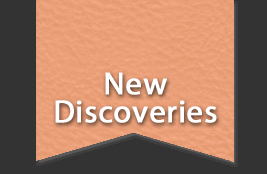
<style>
.page{position:relative;width:267px;height:174px;background:#333333}
.page>*{position:absolute;margin:0}
.t1{font:32px "MyriadPro-Regular";letter-spacing:0.01em;color:#ffffff;font-weight:bold}
</style>
<div class="page">
<p class="t1" style="left:55px;top:72px;width:162px;height:51px">New Discoveries</p>
</div>
